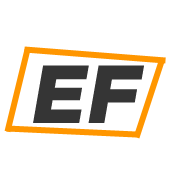
<style>
.page{position:relative;width:170px;height:170px;background:#ffffff}
.page>*{position:absolute;margin:0}
.t1{font:82.1px "GothamPro-Black";letter-spacing:0.015em;color:#353535;font-style:italic}
</style>
<div class="page">
<p class="t1" style="left:33px;top:65px;width:111px;height:58px">EF</p>
</div>
